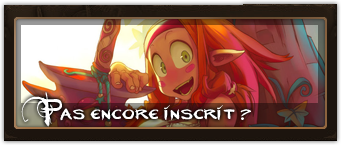
<style>
.page{position:relative;width:341px;height:145px}
.page>*{position:absolute;margin:0}
.t1{font:31px "Neverwinter";color:#ffffff}
</style>
<div class="page">
<p class="t1" style="left:21px;top:92px;width:230px;height:35px">Pas encore inscrit ?</p>
</div>
